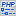
<style>
.page{position:relative;width:16px;height:16px;background:#dcdcdc}
.page>*{position:absolute;margin:0}
.t1{font:7px "Small Fonts";letter-spacing:0.1em;color:#003cb5;font-style:italic}
</style>
<div class="page">
<p class="t1" style="left:1px;top:2px;width:15px;height:5px">PHP</p>
</div>
